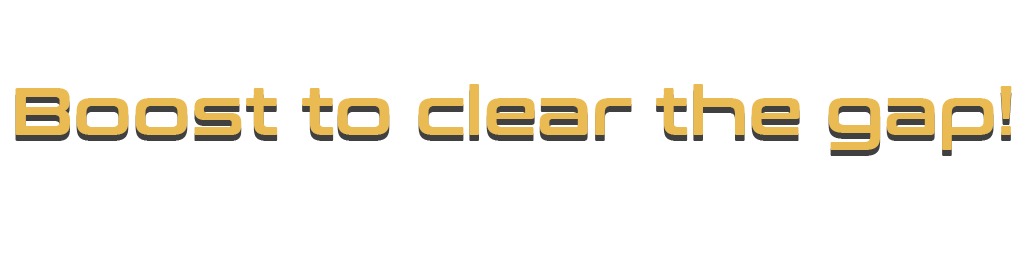
<style>
.page{position:relative;width:1024px;height:256px;background:#ffffff}
.page>*{position:absolute;margin:0}
.t1{font:68px "ConthraxSb-Regular";color:#e9bb52}
</style>
<div class="page">
<p class="t1" style="left:15px;top:84px;width:997px;height:66px">Boost to clear the gap!</p>
</div>
